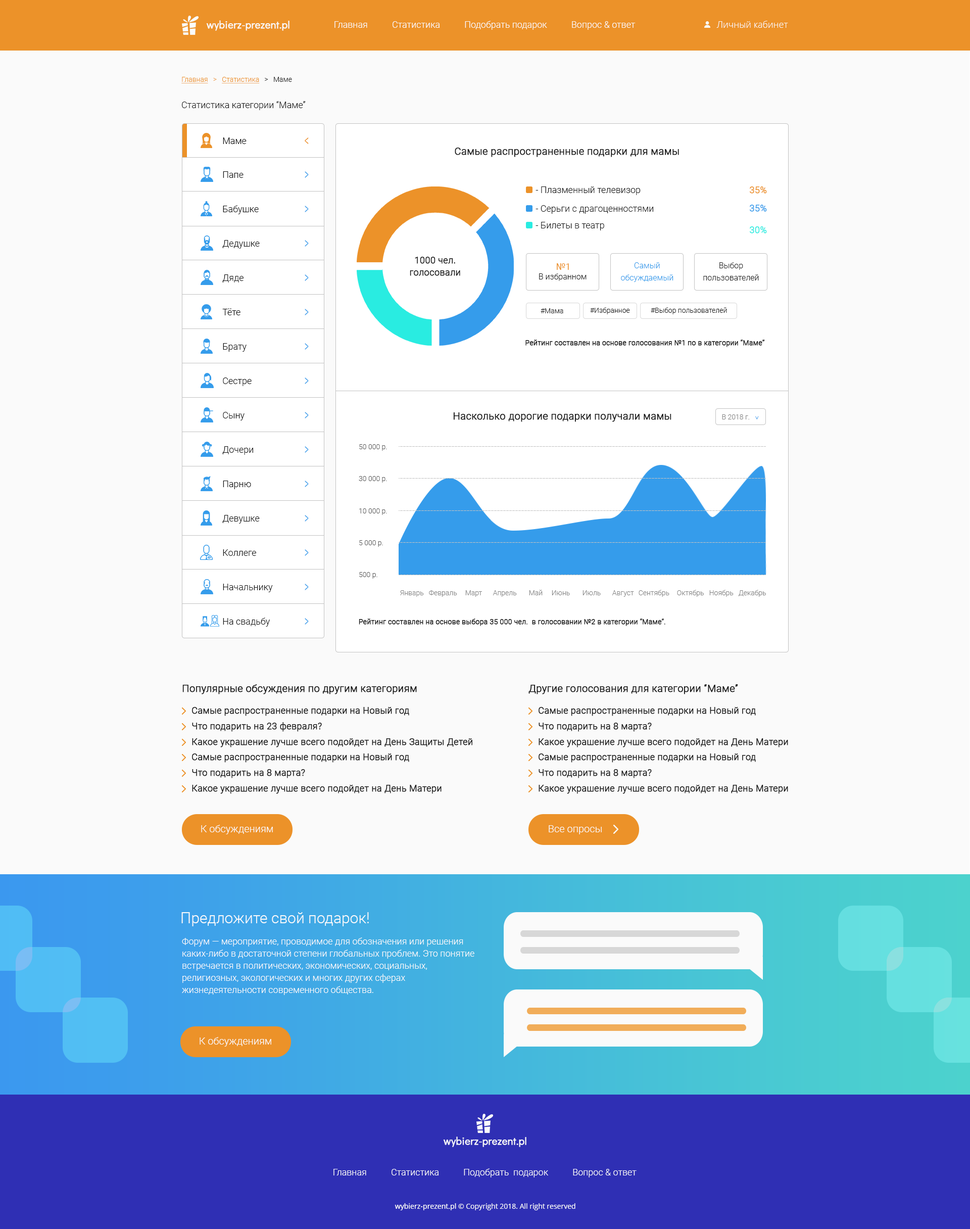
<style>
.page{position:relative;width:970px;height:1229px;background:#fafafa}
.page>*{position:absolute;margin:0}
.t1{font:10.1px "DidactGothic-Regular";color:#fafafa;font-weight:bold}
.t2{font:9.1px "Roboto-Light";color:#fafafa}
.t3{font:9.1px "OpenSans-Light";color:#fafafa}
.t4{font:7.1px "Roboto-Light";color:#ec9229;text-decoration:underline}
.t5{font:7.1px "Roboto-Light";color:#ec9229}
.t6{font:7.1px "Roboto-Light";color:#171717}
.t7{font:9.1px "Roboto-Light";color:#191919}
.t8{font:9.1px "Roboto-Light";color:#0e0e0e}
.t9{font:16.1px "Roboto-Light";color:#ec9229;scale:0.5 1}
.t10{font:10.1px "Roboto-Light";color:#191919;font-weight:bold}
.t11{font:16.1px "Roboto-Light";color:#359ceb;scale:0.48 1}
.t12{font:9.1px "Roboto-Light";color:#141414}
.t13{font:9.1px "Roboto-Light";color:#ec9229;font-weight:bold}
.t14{font:9.1px "Roboto-Light";color:#359ceb;font-weight:bold}
.t15{font:9.1px "Roboto-Light";color:#29ece1;font-weight:bold}
.t16{font:9.1px/12.1px "Roboto-Light";color:#171717;font-weight:bold}
.t17{font:9.1px "Roboto-Regular";color:#ec9229}
.t18{font:8.1px/12.1px "Roboto-Light";color:#359ceb}
.t19{font:8.1px/12.1px "Roboto-Light";color:#1d1d1d}
.t20{font:8.1px "Roboto-Light";color:#171717}
.t21{font:7.1px "Roboto-Light";color:#191919}
.t22{font:7.1px "Roboto-Light";color:#191919;font-weight:bold}
.t23{font:7.1px "Roboto-Light";color:#828282}
.t24{font:7.1px "Roboto-Light"}
.t25{font:7.1px "Roboto-Light";color:#575757}
.t26{font:7.1px "Roboto-Light";color:#1a1a1a;font-weight:bold}
.t27{font:10.1px "Roboto-Light";color:#171717;font-weight:bold}
.t28{font:9.1px "Roboto-Light";color:#171717;font-weight:bold}
.t29{font:10.1px "Roboto-Light";color:#fafafa}
.t30{font:15.2px "Roboto-Light";color:#fafafa}
.t31{font:9.1px/12.1px "Roboto-Light";color:#fafafa}
.t32{font:7.1px "OpenSans-Regular";color:#fafafa}
.t33{font:7.1px "NotoSans";color:#fafafa}
</style>
<div class="page">
<p class="t1" style="left:206px;top:20px;width:84px;height:11px">wybierz-prezent.pl</p>
<p class="t2" style="left:335px;top:21px;width:301px;height:9px">Главная           Статистика           Подобрать подарок           Вопрос &amp; ответ</p>
<p class="t3" style="left:717px;top:21px;width:71px;height:7px">Личный кабинет</p>
<p class="t4" style="left:181px;top:77px;width:111px;height:7px">Главная   <span class="t5">&gt;   </span>Статистика<span class="t6">   &gt;   Маме</span></p>
<p class="t7" style="left:182px;top:101px;width:124px;height:9px">Статистика категории “Маме”</p>
<p class="t8" style="left:223px;top:137px;width:24px;height:7px">Маме</p>
<p class="t9" style="left:305px;top:137px;width:4px;height:7px;rotate:180deg">&gt;</p>
<p class="t10" style="left:455px;top:148px;width:224px;height:9px">Самые распространенные подарки для мамы</p>
<p class="t8" style="left:223px;top:171px;width:21px;height:7px">Папе</p>
<p class="t11" style="left:305px;top:171px;width:4px;height:7px">&gt;</p>
<p class="t12" style="left:536px;top:186px;width:105px;height:9px">- Плазменный телевизор</p>
<p class="t13" style="left:750px;top:186px;width:17px;height:8px">35%</p>
<p class="t8" style="left:223px;top:205px;width:36px;height:9px">Бабушке</p>
<p class="t11" style="left:305px;top:206px;width:4px;height:6px">&gt;</p>
<p class="t12" style="left:536px;top:205px;width:117px;height:9px">- Серьги с драгоценностями</p>
<p class="t14" style="left:750px;top:205px;width:17px;height:7px">35%</p>
<p class="t12" style="left:536px;top:222px;width:68px;height:8px">- Билеты в театр</p>
<p class="t15" style="left:750px;top:226px;width:17px;height:7px">30%</p>
<p class="t8" style="left:222px;top:240px;width:38px;height:9px">Дедушке</p>
<p class="t11" style="left:305px;top:240px;width:4px;height:7px">&gt;</p>
<p class="t16" style="left:410px;top:257px;width:50px;height:19px;text-align:center">1000 чел.<br>голосовали</p>
<p class="t17" style="left:557px;top:263px;width:12px;height:7px">№1</p>
<p class="t18" style="left:621px;top:262px;width:53px;height:20px;text-align:center">Самый<br>обсуждаемый</p>
<p class="t19" style="left:703px;top:262px;width:56px;height:18px;text-align:center">Выбор<br>пользователей</p>
<p class="t8" style="left:222px;top:274px;width:22px;height:8px">Дяде</p>
<p class="t11" style="left:305px;top:274px;width:4px;height:7px">&gt;</p>
<p class="t20" style="left:539px;top:273px;width:48px;height:8px">В избранном</p>
<p class="t8" style="left:222px;top:308px;width:19px;height:7px">Тёте</p>
<p class="t11" style="left:305px;top:309px;width:4px;height:6px">&gt;</p>
<p class="t21" style="left:541px;top:308px;width:22px;height:5px">#Мама</p>
<p class="t21" style="left:590px;top:307px;width:40px;height:7px">#Избранное</p>
<p class="t21" style="left:651px;top:307px;width:76px;height:7px">#Выбор пользователей</p>
<p class="t22" style="left:526px;top:340px;width:239px;height:7px">Рейтинг составлен на основе голосования №1 по в категории “Маме”</p>
<p class="t8" style="left:223px;top:343px;width:24px;height:9px">Брату</p>
<p class="t11" style="left:305px;top:343px;width:4px;height:7px">&gt;</p>
<p class="t8" style="left:223px;top:377px;width:29px;height:9px">Сестре</p>
<p class="t11" style="left:305px;top:377px;width:4px;height:7px">&gt;</p>
<p class="t8" style="left:223px;top:412px;width:22px;height:8px">Сыну</p>
<p class="t11" style="left:305px;top:412px;width:4px;height:6px">&gt;</p>
<p class="t10" style="left:453px;top:412px;width:219px;height:10px">Насколько дорогие подарки получали мамы</p>
<p class="t23" style="left:722px;top:414px;width:27px;height:5px">В 2018 г.</p>
<p class="t24" style="left:755px;top:416px;width:4px;height:3px;rotate:90deg">&gt;</p>
<p class="t8" style="left:222px;top:446px;width:31px;height:9px">Дочери</p>
<p class="t11" style="left:305px;top:446px;width:4px;height:7px">&gt;</p>
<p class="t25" style="left:359px;top:444px;width:28px;height:7px">50 000 р.</p>
<p class="t8" style="left:223px;top:481px;width:28px;height:8px">Парню</p>
<p class="t11" style="left:305px;top:481px;width:4px;height:6px">&gt;</p>
<p class="t25" style="left:359px;top:476px;width:28px;height:7px">30 000 р.</p>
<p class="t25" style="left:359px;top:508px;width:28px;height:7px">10 000 р.</p>
<p class="t8" style="left:222px;top:515px;width:38px;height:9px">Девушке</p>
<p class="t11" style="left:305px;top:515px;width:4px;height:7px">&gt;</p>
<p class="t25" style="left:359px;top:540px;width:24px;height:7px">5 000 р.</p>
<p class="t8" style="left:223px;top:549px;width:33px;height:7px">Коллеге</p>
<p class="t11" style="left:305px;top:549px;width:4px;height:7px">&gt;</p>
<p class="t25" style="left:359px;top:572px;width:18px;height:7px">500 р.</p>
<p class="t8" style="left:223px;top:584px;width:50px;height:8px">Начальнику</p>
<p class="t11" style="left:305px;top:584px;width:4px;height:6px">&gt;</p>
<p class="t23" style="left:400px;top:590px;width:24px;height:7px">Январь</p>
<p class="t23" style="left:429px;top:590px;width:28px;height:7px">Февраль</p>
<p class="t23" style="left:465px;top:590px;width:17px;height:7px">Март</p>
<p class="t23" style="left:493px;top:590px;width:24px;height:7px">Апрель</p>
<p class="t23" style="left:529px;top:590px;width:14px;height:5px">Май</p>
<p class="t23" style="left:552px;top:590px;width:18px;height:5px">Июнь</p>
<p class="t23" style="left:583px;top:590px;width:18px;height:5px">Июль</p>
<p class="t23" style="left:612px;top:590px;width:22px;height:7px">Август</p>
<p class="t23" style="left:639px;top:590px;width:31px;height:7px">Сентябрь</p>
<p class="t23" style="left:677px;top:590px;width:27px;height:7px">Октябрь</p>
<p class="t23" style="left:709px;top:590px;width:25px;height:7px">Ноябрь</p>
<p class="t23" style="left:739px;top:590px;width:27px;height:7px">Декабрь</p>
<p class="t8" style="left:223px;top:618px;width:47px;height:9px">На свадьбу</p>
<p class="t11" style="left:305px;top:618px;width:4px;height:7px">&gt;</p>
<p class="t26" style="left:359px;top:619px;width:307px;height:7px">Рейтинг составлен на основе выбора 35 000 чел.  в голосовании №2 в категории “Маме”.</p>
<p class="t27" style="left:182px;top:684px;width:235px;height:10px">Популярные обсуждения по другим категориям</p>
<p class="t27" style="left:529px;top:684px;width:209px;height:10px">Другие голосования для категории “Маме”</p>
<p class="t28" style="left:192px;top:707px;width:217px;height:9px">Самые распространенные подарки на Новый год</p>
<p class="t28" style="left:539px;top:707px;width:217px;height:9px">Самые распространенные подарки на Новый год</p>
<p class="t28" style="left:192px;top:722px;width:130px;height:10px">Что подарить на 23 февраля?</p>
<p class="t28" style="left:539px;top:723px;width:113px;height:9px">Что подарить на 8 марта?</p>
<p class="t28" style="left:192px;top:738px;width:280px;height:9px">Какое украшение лучше всего подойдет на День Защиты Детей</p>
<p class="t28" style="left:539px;top:738px;width:249px;height:9px">Какое украшение лучше всего подойдет на День Матери</p>
<p class="t28" style="left:192px;top:753px;width:217px;height:10px">Самые распространенные подарки на Новый год</p>
<p class="t28" style="left:539px;top:753px;width:217px;height:10px">Самые распространенные подарки на Новый год</p>
<p class="t28" style="left:192px;top:769px;width:113px;height:9px">Что подарить на 8 марта?</p>
<p class="t28" style="left:539px;top:769px;width:113px;height:9px">Что подарить на 8 марта?</p>
<p class="t28" style="left:192px;top:785px;width:250px;height:9px">Какое украшение лучше всего подойдет на День Матери</p>
<p class="t28" style="left:539px;top:785px;width:249px;height:9px">Какое украшение лучше всего подойдет на День Матери</p>
<p class="t29" style="left:201px;top:825px;width:72px;height:9px">К обсуждениям</p>
<p class="t29" style="left:549px;top:825px;width:53px;height:9px">Все опросы</p>
<p class="t30" style="left:181px;top:912px;width:188px;height:14px">Предложите свой подарок!</p>
<p class="t31" style="left:182px;top:937px;width:293px;height:58px;text-align:right">Форум — мероприятие, проводимое для обозначения или решения каких-либо в достаточной степени глобальных проблем. Это понятие встречается в политических, экономических, социальных, религиозных, экологических и многих других сферах жизнедеятельности современного общества.</p>
<p class="t29" style="left:200px;top:1037px;width:71px;height:10px">К обсуждениям</p>
<p class="t1" style="left:443px;top:1137px;width:84px;height:10px">wybierz-prezent.pl</p>
<p class="t2" style="left:334px;top:1168px;width:303px;height:9px">Главная           Статистика           Подобрать  подарок           Вопрос &amp; ответ</p>
<p class="t32" style="left:395px;top:1203px;width:181px;height:7px"><span class="t33">wybierz-prezent.pl </span>© Copyright 2018. All right reserved</p>
</div>
